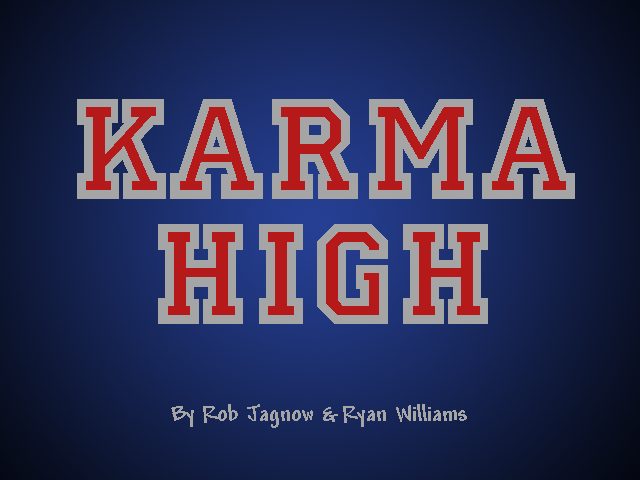
<style>
.page{position:relative;width:640px;height:480px}
.page>*{position:absolute;margin:0}
.t1{font:150px/125px "Allstar-Regular";color:#a5a5a5}
.t2{font:24px "Andy-Bold";color:#a5a5a5}
</style>
<div class="page">
<p class="t1" style="left:77px;top:99px;width:498px;height:225px;text-align:center">KARMA<br>HIGH</p>
<p class="t2" style="left:171px;top:404px;width:296px;height:24px">By Rob Jagnow &amp; Ryan Williams</p>
</div>
